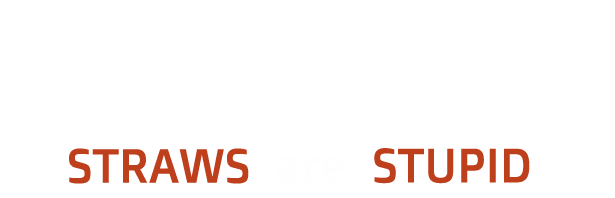
<style>
.page{position:relative;width:615px;height:198px;background:#ffffff}
.page>*{position:absolute;margin:0}
.t1{font:48px "DoppioOne-Regular";color:#be3f1c}
</style>
<div class="page">
<p class="t1" style="left:69px;top:148px;width:180px;height:36px">STRAWS</p>
<p class="t1" style="left:374px;top:148px;width:156px;height:36px">STUPID</p>
</div>
